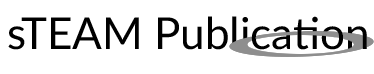
<style>
.page{position:relative;width:374px;height:74px;background:#ffffff}
.page>*{position:absolute;margin:0}
.t1{font:44px "Lato-Regular";color:#000000}
</style>
<div class="page">
<p class="t1" style="left:8px;top:16px;width:359px;height:34px">sTEAM Publication</p>
</div>
